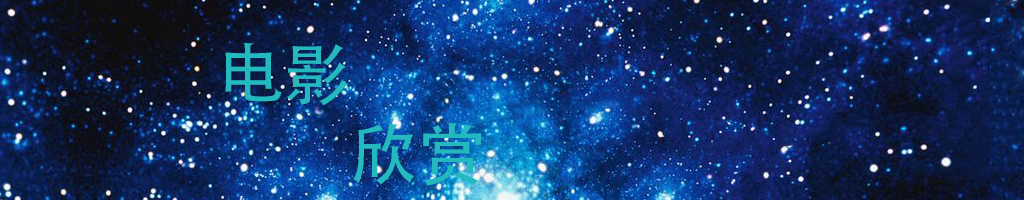
<style>
.page{position:relative;width:1024px;height:200px}
.page>*{position:absolute;margin:0}
.t1{font:66.7px "AdobeHeitiStd-Regular";color:#24b8bf}
</style>
<div class="page">
<p class="t1" style="left:225px;top:42px;width:256px;height:144px">电影<br>         欣赏</p>
</div>
